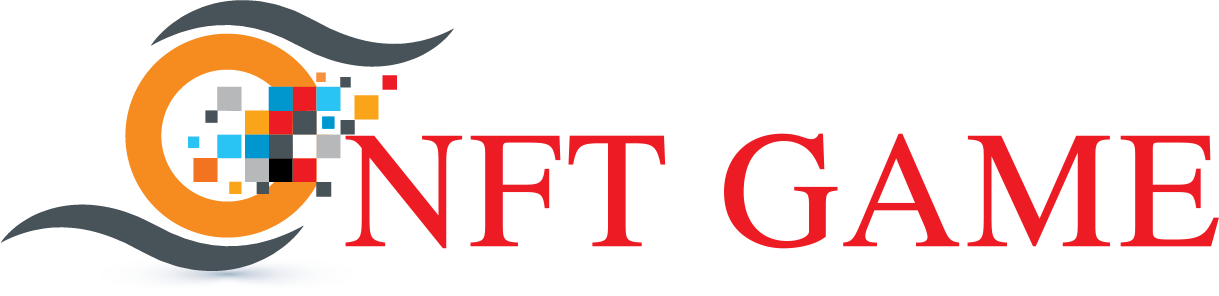
<style>
.page{position:relative;width:1219px;height:296px;background:#ffffff}
.page>*{position:absolute;margin:0}
.t1{font:166.4px "STIXGeneral-Regular";color:#ed1c24;font-weight:bold}
</style>
<div class="page">
<p class="t1" style="left:345px;top:133px;width:874px;height:116px">NFT GAME</p>
</div>
